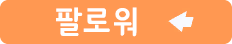
<style>
.page{position:relative;width:232px;height:44px;background:#ff9852}
.page>*{position:absolute;margin:0}
.t1{font:32px "12LotteMartDreamBold";letter-spacing:0.05em;color:#ffffff;text-transform:uppercase;scale:0.95 1}
</style>
<div class="page">
<p class="t1" style="left:56px;top:7px;width:81px;height:30px">팔로워</p>
</div>
